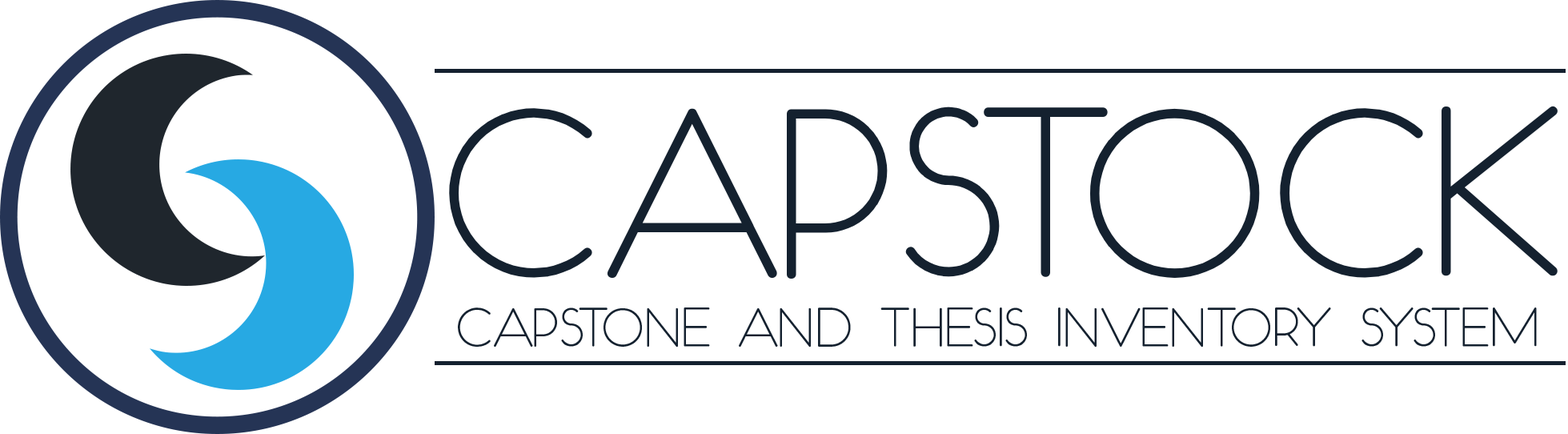
<style>
.page{position:relative;width:1568px;height:434px;background:#ffffff}
.page>*{position:absolute;margin:0}
.t1{font:247.9px "Occupied";color:#14212f;text-transform:uppercase}
.t2{font:56.7px "Occupied";color:#14212f;text-transform:uppercase}
</style>
<div class="page">
<p class="t1" style="left:449px;top:106px;width:1109px;height:173px">capstoCK</p>
<p class="t2" style="left:458px;top:307px;width:1079px;height:40px">capstone and thesis inventory System</p>
</div>
